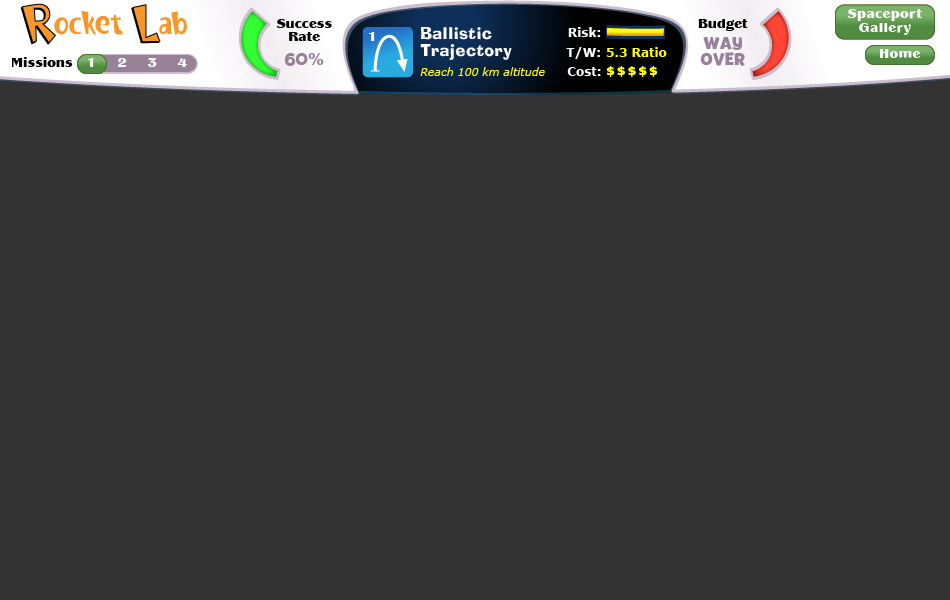
<style>
.page{position:relative;width:950px;height:600px;background:#333333}
.page>*{position:absolute;margin:0}
.t1{font:14px/14px "Panache-Black-DTC";letter-spacing:0.025em;color:#ffffff}
.t2{font:14px/13px "Panache-Black-DTC";color:#000000}
.t3{font:16px/17px "Blox-Regular";letter-spacing:0.025em;color:#ffffff}
.t4{font:12px "Verdana-Bold";color:#ffffff}
.t5{font:14px "Panache-Black-DTC";color:#000000}
.t6{font:18px/16px "Billy-Bold";color:#998199}
.t7{font:18px "Billy-Bold";color:#998199}
.t8{font:16px "Arial-Black";color:#998199}
.t9{font:12px "Verdana-Bold";color:#ffff00}
.t10{font:14px "Panache-Black-DTC";letter-spacing:0.025em;color:#ffffff}
.t11{font:14px "Panache-Black-DTC";color:#ffffff}
.t12{font:11px "Verdana-Italic";color:#ffff00}
</style>
<div class="page">
<p class="t1" style="left:847px;top:9px;width:75px;height:26px;text-align:center">Spaceport<br>Gallery</p>
<p class="t1" style="left:847px;top:9px;width:75px;height:26px;text-align:center">Spaceport<br>Gallery</p>
<p class="t2" style="left:276px;top:19px;width:56px;height:22px;text-align:center">Success<br>Rate</p>
<p class="t3" style="left:420px;top:27px;width:92px;height:33px">Ballistic<br>Trajectory</p>
<p class="t4" style="left:568px;top:27px;width:33px;height:10px">Risk:</p>
<p class="t5" style="left:698px;top:19px;width:50px;height:12px">Budget</p>
<p class="t6" style="left:700px;top:37px;width:45px;height:30px;text-align:center">WAY<br>OVER</p>
<p class="t7" style="left:284px;top:53px;width:40px;height:13px">60<span class="t8">%</span></p>
<p class="t4" style="left:566px;top:47px;width:34px;height:12px">T/W:</p>
<p class="t9" style="left:606px;top:47px;width:61px;height:10px">5.3 Ratio</p>
<p class="t10" style="left:880px;top:49px;width:41px;height:9px">Home</p>
<p class="t10" style="left:880px;top:49px;width:41px;height:9px">Home</p>
<p class="t5" style="left:12px;top:57px;width:61px;height:10px">Missions</p>
<p class="t11" style="left:88px;top:58px;width:6px;height:9px">1</p>
<p class="t11" style="left:118px;top:58px;width:9px;height:9px">2</p>
<p class="t11" style="left:147px;top:58px;width:10px;height:9px">3</p>
<p class="t11" style="left:177px;top:58px;width:11px;height:9px">4</p>
<p class="t12" style="left:420px;top:67px;width:125px;height:9px">Reach 100 km altitude</p>
<p class="t4" style="left:567px;top:67px;width:34px;height:9px">Cost:</p>
</div>
